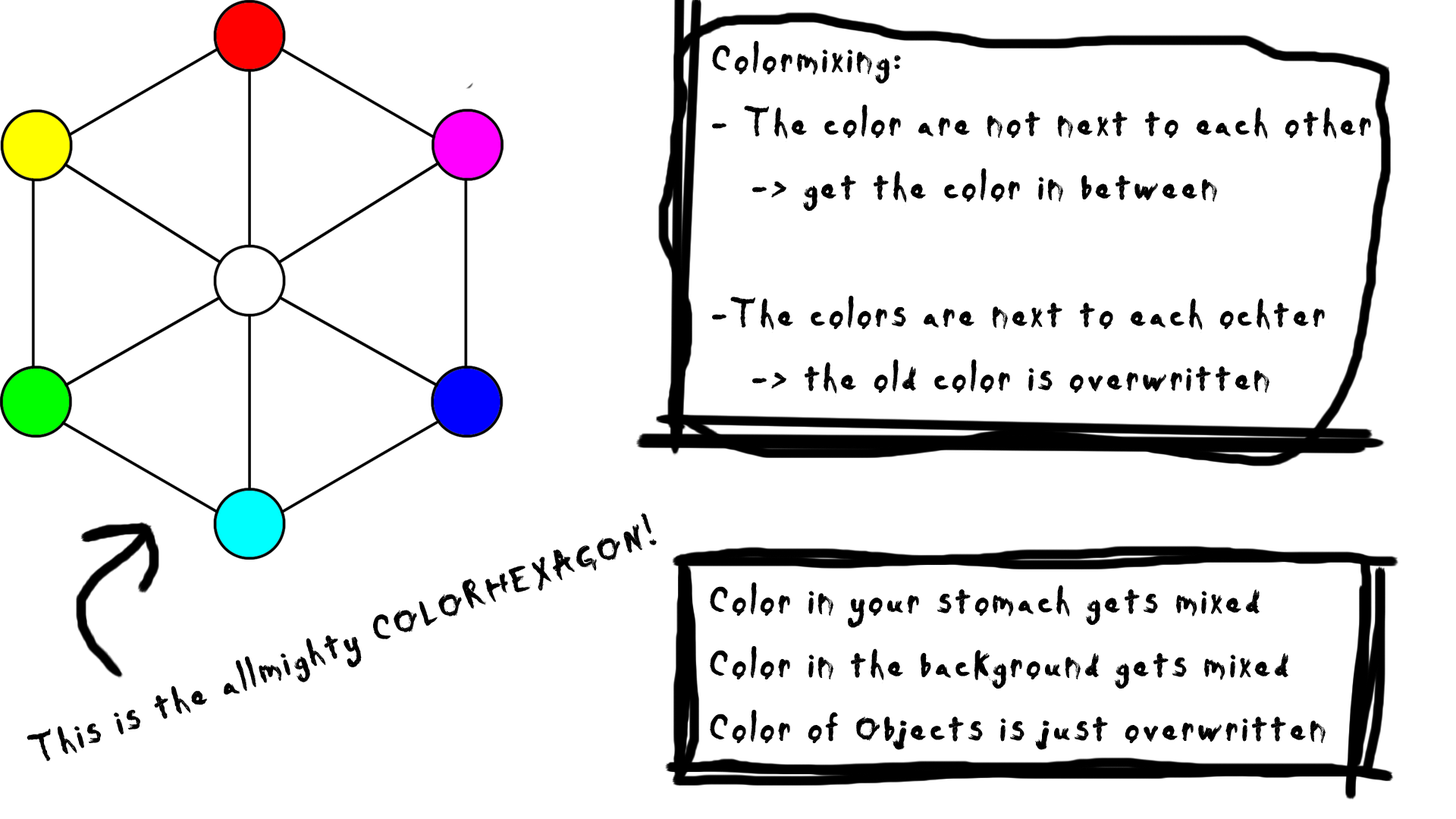
<style>
.page{position:relative;width:1456px;height:819px;background:#ffffff}
.page>*{position:absolute;margin:0}
.t1{font:53.1px "Daubmark";color:#000000}
</style>
<div class="page">
<p class="t1" style="left:712px;top:41px;width:659px;height:356px">Colormixing:<br>- The color are not next to each other<br>   -&gt; get the color in between<br><br>-The colors are next to each ochter<br>   -&gt; the old color is overwritten</p>
<p class="t1" style="left:27px;top:513px;width:630px;height:248px;rotate:-19deg">This is the allmighty COLORHEXAGON!</p>
<p class="t1" style="left:710px;top:582px;width:616px;height:168px">Color in your stomach gets mixed<br>Color in the background gets mixed<br>Color of Objects is just overwritten</p>
</div>
